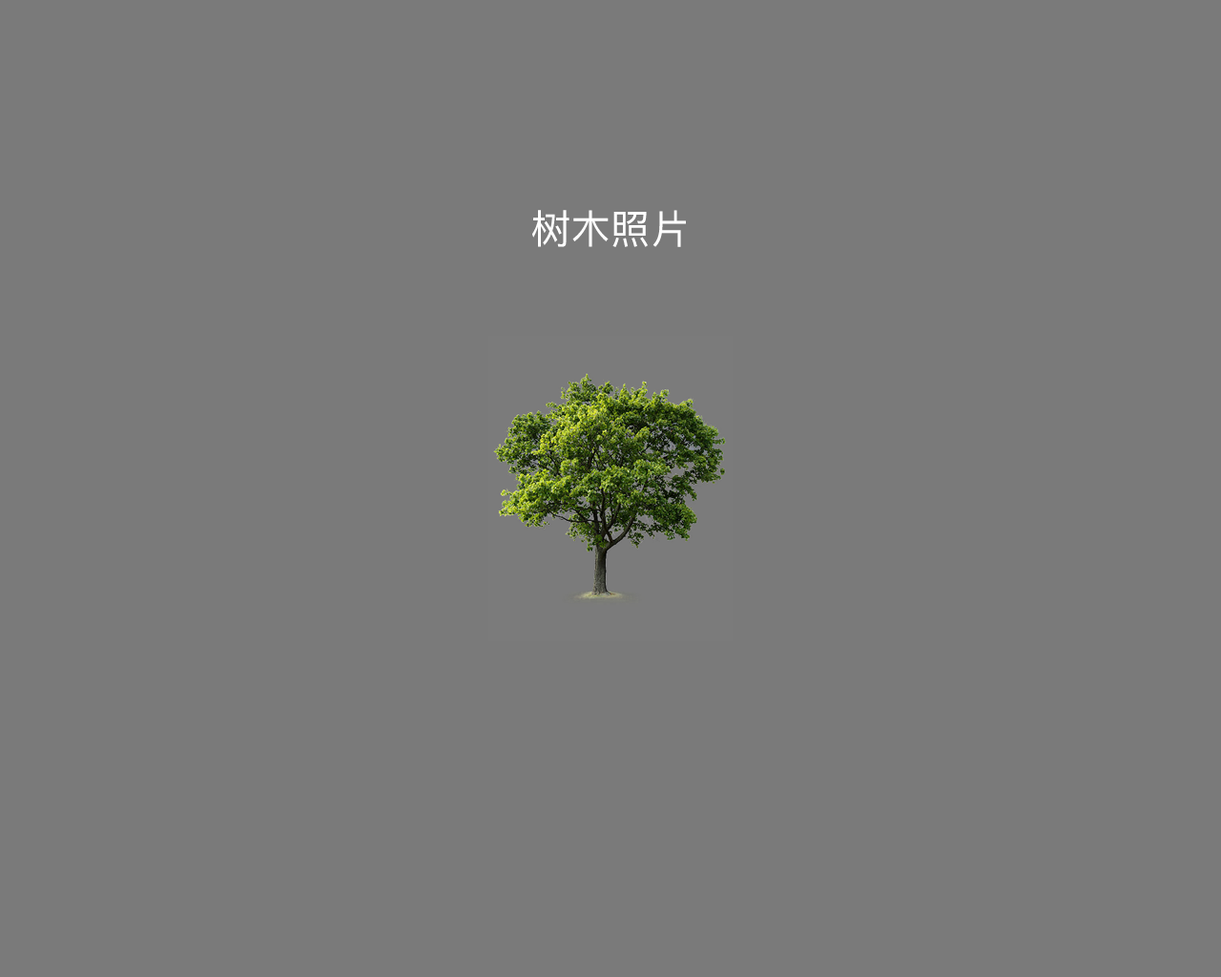
<style>
.page{position:relative;width:1221px;height:977px;background:#7a7a7a}
.page>*{position:absolute;margin:0}
.t1{font:39.7px "PingFangSC-Regular";color:#ffffff}
</style>
<div class="page">
<p class="t1" style="left:532px;top:210px;width:154px;height:37px">树木照片</p>
</div>
